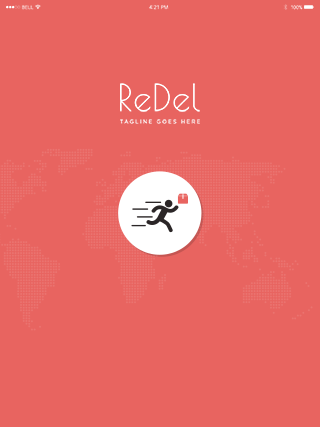
<style>
.page{position:relative;width:320px;height:427px;background:#e86460}
.page>*{position:absolute;margin:0}
.t1{font:36.3px "PoiretOne-Regular";color:#ffffff;font-weight:bold}
.t2{font:5px "GothamBook";letter-spacing:0.3em;color:#ffffff;text-transform:uppercase;font-weight:bold}
</style>
<div class="page">
<p class="t1" style="left:120px;top:83px;width:80px;height:29px">ReDel</p>
<p class="t2" style="left:120px;top:119px;width:80px;height:5px">TagLine goes here</p>
</div>
